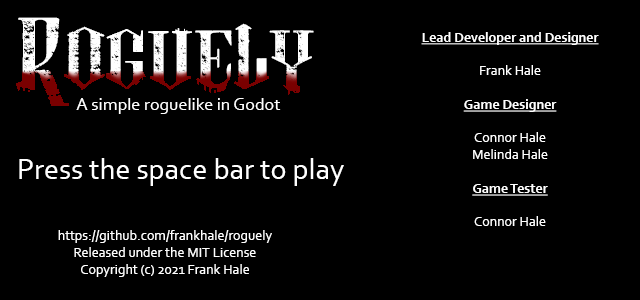
<style>
.page{position:relative;width:640px;height:300px;background:#000000}
.page>*{position:absolute;margin:0}
.t1{font:82px "vtkslightness2";color:#ffffff}
.t2{font:14px "Corbel-Bold";color:#ffffff;text-decoration:underline}
.t3{font:14px "Corbel";color:#ffffff}
.t4{font:18px "Corbel";color:#ffffff}
.t5{font:30px "Corbel";color:#ffffff}
</style>
<div class="page">
<p class="t1" style="left:16px;top:17px;width:298px;height:89px">Roguely</p>
<p class="t2" style="left:421px;top:32px;width:178px;height:194px;text-align:center">Lead Developer and Designer<br><br><span class="t3">Frank Hale<br></span><br>Game Designer<br><span class="t3"><br>Connor Hale<br>Melinda Hale<br><br></span>Game Tester<br><span class="t3"><br>Connor Hale</span></p>
<p class="t4" style="left:76px;top:98px;width:205px;height:16px">A simple roguelike in Godot</p>
<p class="t5" style="left:19px;top:158px;width:325px;height:28px">Press the space bar to play</p>
<p class="t3" style="left:58px;top:230px;width:214px;height:47px;text-align:center">https://github.com/frankhale/roguely<br>Released under the MIT License<br>Copyright (c) 2021 Frank Hale</p>
</div>
